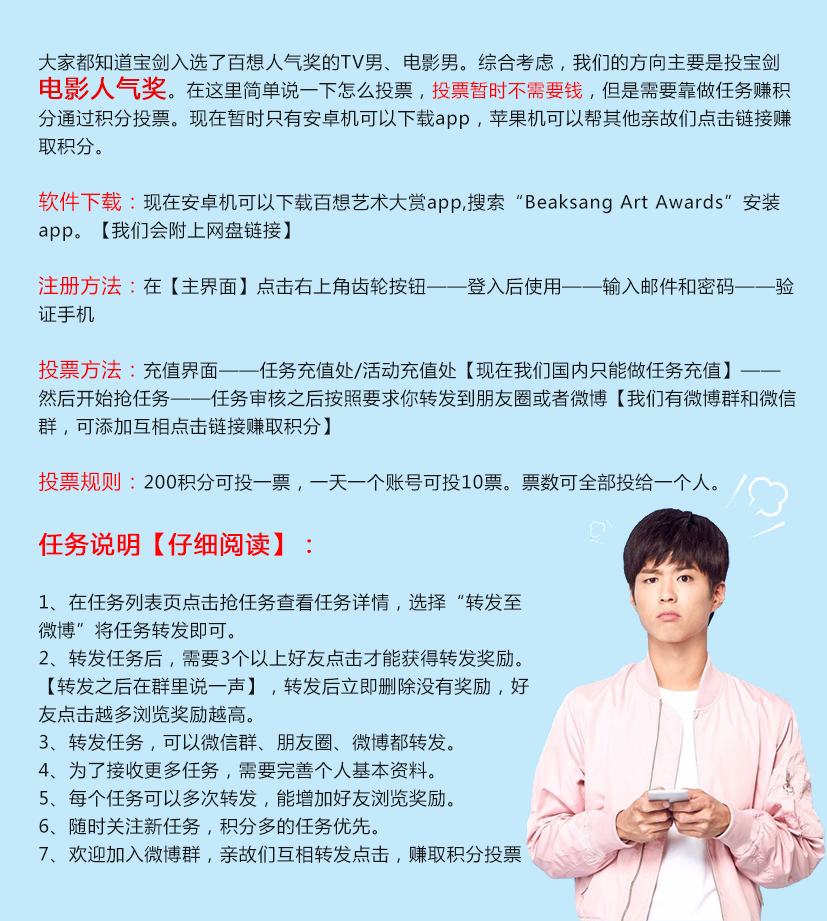
<style>
.page{position:relative;width:827px;height:921px;background:#c4e9fb}
.page>*{position:absolute;margin:0}
.t1{font:18px/28px "MicrosoftYaHei";letter-spacing:0.05em;color:#141414}
.t2{font:24px/28px "MicrosoftYaHei";letter-spacing:0.05em;color:#e90303;font-weight:bold}
.t3{font:18px/28px "MicrosoftYaHei";letter-spacing:0.05em;color:#ff0000}
.t4{font:20px/28px "MicrosoftYaHei";letter-spacing:0.05em;color:#ff0000}
.t5{font:20px/28px "MicrosoftYaHei";letter-spacing:0.05em;color:#fc0000}
.t6{font:24px/28px "MicrosoftYaHei";letter-spacing:0.05em;color:#ff0000;font-weight:bold}
</style>
<div class="page">
<p class="t1" style="left:38px;top:53px;width:758px;height:439px">大家都知道宝剑入选了百想人气奖的TV男、电影男。综合考虑，我们的方向主要是投宝剑<span class="t2">电影人气奖</span>。在这里简单说一下怎么投票，<span class="t3">投票暂时不需要钱</span>，但是需要靠做任务赚积分通过积分投票。现在暂时只有安卓机可以下载app，苹果机可以帮其他亲故们点击链接赚取积分。<br><br><span class="t4">软件下载：</span>现在安卓机可以下载百想艺术大赏app,搜索“Beaksang Art Awards”安装app。【我们会附上网盘链接】<br><br><span class="t4">注册方法：</span>在【主界面】点击右上角齿轮按钮——登入后使用——输入邮件和密码——验证手机<br><br><span class="t5">投票方法：</span>充值界面——任务充值处/活动充值处【现在我们国内只能做任务充值】——然后开始抢任务——任务审核之后按照要求你转发到朋友圈或者微博【我们有微博群和微信群，可添加互相点击链接赚取积分】<br><br><span class="t4">投票规则：</span>200积分可投一票，一天一个账号可投10票。票数可全部投给一个人。</p>
<p class="t1" style="left:38px;top:532px;width:491px;height:331px"><span class="t6">任务说明【仔细阅读】：<br></span><br>1、在任务列表页点击抢任务查看任务详情，选择“转发至微博”将任务转发即可。<br>2、转发任务后，需要3个以上好友点击才能获得转发奖励。【转发之后在群里说一声】，转发后立即删除没有奖励，好友点击越多浏览奖励越高。<br>3、转发任务，可以微信群、朋友圈、微博都转发。<br>4、为了接收更多任务，需要完善个人基本资料。<br>5、每个任务可以多次转发，能增加好友浏览奖励。<br>6、随时关注新任务，积分多的任务优先。<br>7、欢迎加入微博群，亲故们互相转发点击，赚取积分投票</p>
</div>
